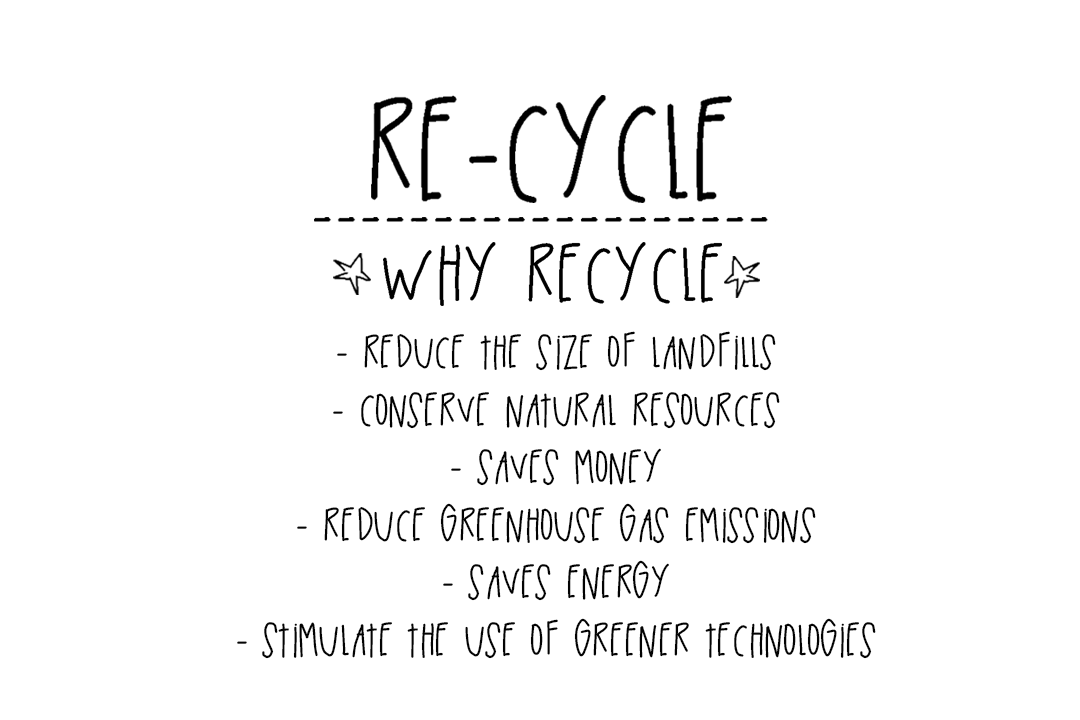
<style>
.page{position:relative;width:1080px;height:720px;background:#ffffff}
.page>*{position:absolute;margin:0}
.t1{font:48px "BlackTinBox";color:#030303}
</style>
<div class="page">
<p class="t1" style="left:237px;top:331px;width:639px;height:328px;text-align:center">- Reduce the Size of Landfills<br>- Conserve Natural Resources<br>- Saves Money<br>- Reduce Greenhouse Gas Emissions<br>- Saves Energy<br>- Stimulate the Use of Greener Technologies</p>
</div>
